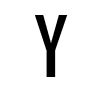
<style>
.page{position:relative;width:100px;height:100px;background:#ffffff}
.page>*{position:absolute;margin:0}
.t1{font:100px "TwCenMT-Condensed";color:#000000}
</style>
<div class="page">
<p class="t1" style="left:35px;top:15px;width:33px;height:62px">Y</p>
</div>
